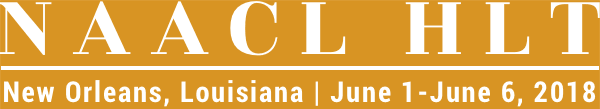
<style>
.page{position:relative;width:600px;height:109px;background:#d89423}
.page>*{position:absolute;margin:0}
.t1{font:92.4px "RozhaOne-Regular";letter-spacing:0.2em;color:#ffffff}
.t2{font:28.8px "RobotoCondensed-Bold";letter-spacing:0.065em;color:#ffffff}
</style>
<div class="page">
<p class="t1" style="left:0px;top:1px;width:600px;height:55px">NAACL HLT</p>
<p class="t2" style="left:4px;top:80px;width:592px;height:27px">New Orleans, Louisiana | June 1-June 6, 2018</p>
</div>
